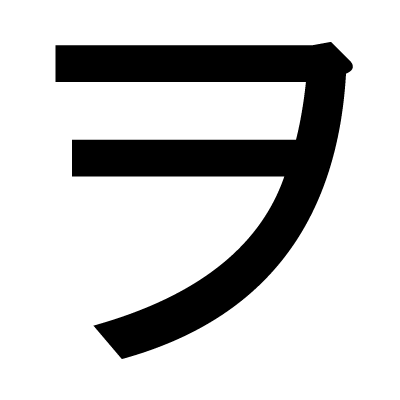
<style>
.page{position:relative;width:400px;height:400px;background:#ffffff}
.page>*{position:absolute;margin:0}
.t1{font:424.8px "MS-PGothic";color:#000000}
</style>
<div class="page">
<p class="t1" style="left:55px;top:42px;width:298px;height:317px">ヲ</p>
</div>
